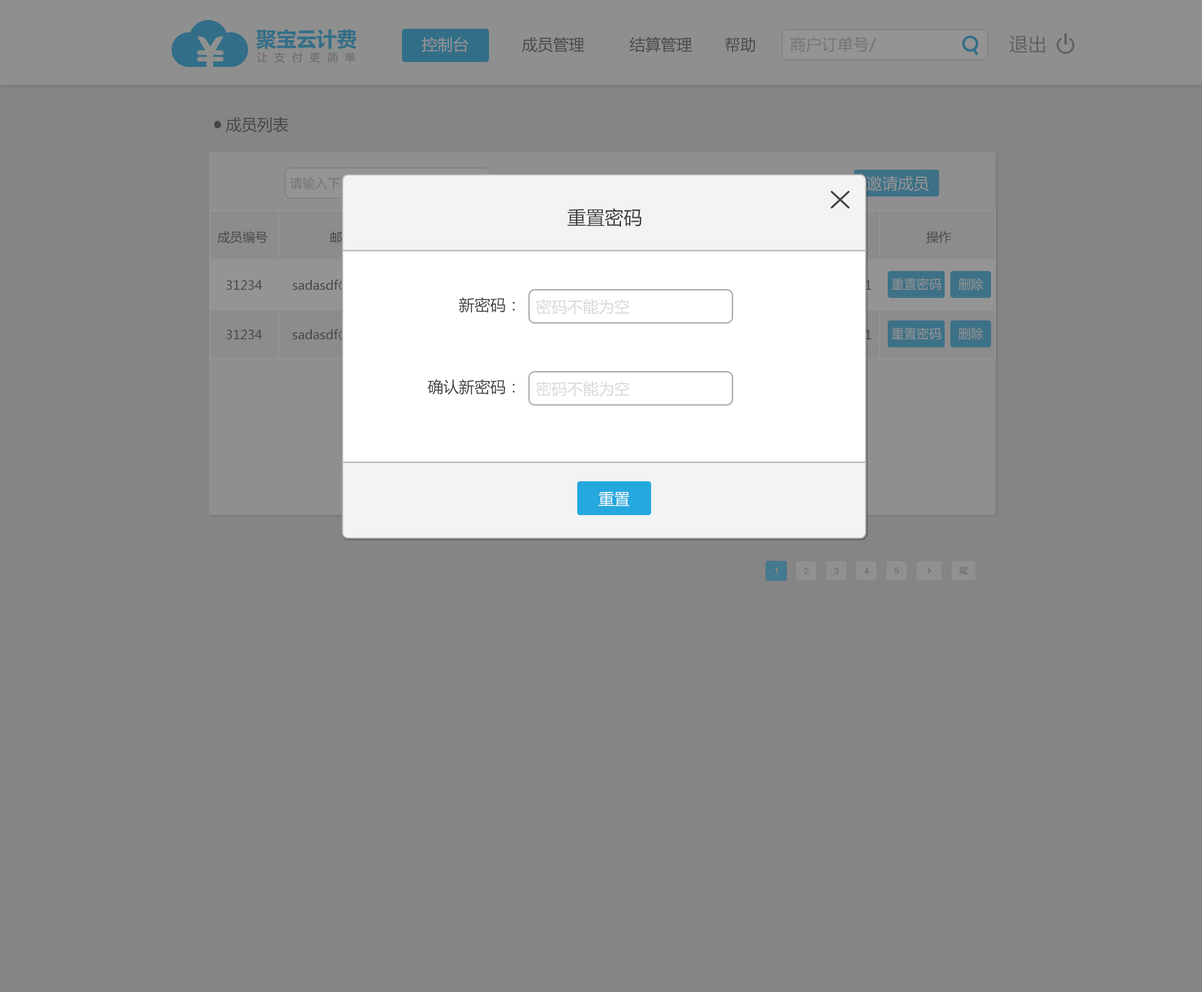
<style>
.page{position:relative;width:1202px;height:992px;background:#858585}
.page>*{position:absolute;margin:0}
.t1{font:15.6px "MicrosoftYaHei";color:#949494}
.t2{font:15.6px "MicrosoftYaHei";color:#3f3f3f}
.t3{font:15.6px "MicrosoftYaHei";color:#747474}
.t4{font:18.8px "MicrosoftYaHei";color:#606060}
.t5{font:15.6px "MicrosoftYaHei";color:#3a3a3a}
.t6{font:18.8px "MicrosoftYaHei";color:#3f3f3f}
.t7{font:12.5px "MicrosoftYaHei";color:#3a3a3a}
.t8{font:12.5px "MicrosoftYaHei";color:#3f3f3f}
.t9{font:12.5px "MicrosoftYaHei";color:#949494}
.t10{font:15.6px "MicrosoftYaHei";color:#d9d9d9}
.t11{font:15.6px "MicrosoftYaHei";color:#ffffff}
</style>
<div class="page">
<p class="t1" style="left:421px;top:37px;width:48px;height:16px">控制台</p>
<p class="t2" style="left:521px;top:37px;width:63px;height:16px">成员管理</p>
<p class="t2" style="left:629px;top:37px;width:63px;height:16px">结算管理</p>
<p class="t2" style="left:725px;top:37px;width:30px;height:15px">帮助</p>
<p class="t3" style="left:790px;top:37px;width:86px;height:16px">商户订单号/ 聚宝订单号/ 付款方名称</p>
<p class="t4" style="left:1009px;top:35px;width:36px;height:18px">退出</p>
<p class="t5" style="left:225px;top:117px;width:64px;height:16px">成员列表</p>
<p class="t1" style="left:866px;top:176px;width:63px;height:16px">邀请成员</p>
<p class="t6" style="left:567px;top:208px;width:75px;height:19px">重置密码</p>
<p class="t7" style="left:217px;top:231px;width:51px;height:13px">成员编号</p>
<p class="t7" style="left:926px;top:231px;width:25px;height:13px">操作</p>
<p class="t8" style="left:226px;top:280px;width:36px;height:10px">31234</p>
<p class="t9" style="left:891px;top:278px;width:50px;height:12px">重置密码</p>
<p class="t9" style="left:958px;top:278px;width:25px;height:12px">删除</p>
<p class="t2" style="left:459px;top:297px;width:56px;height:16px">新密码：</p>
<p class="t10" style="left:536px;top:299px;width:94px;height:16px">密码不能为空</p>
<p class="t8" style="left:226px;top:329px;width:36px;height:11px">31234</p>
<p class="t9" style="left:891px;top:327px;width:50px;height:13px">重置密码</p>
<p class="t9" style="left:958px;top:327px;width:25px;height:13px">删除</p>
<p class="t2" style="left:428px;top:379px;width:87px;height:16px">确认新密码：</p>
<p class="t10" style="left:536px;top:381px;width:94px;height:16px">密码不能为空</p>
<p class="t11" style="left:598px;top:491px;width:32px;height:15px">重置</p>
</div>
